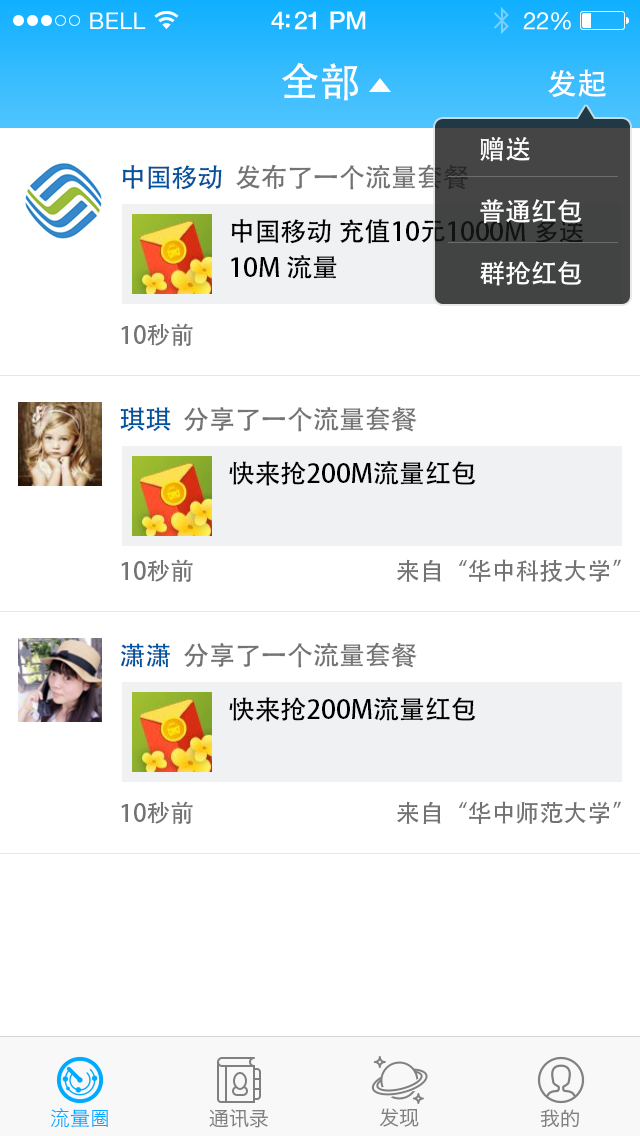
<style>
.page{position:relative;width:640px;height:1136px;background:#ffffff}
.page>*{position:absolute;margin:0}
.t1{font:40px "AdobeHeitiStd-Regular";color:#ffffff}
.t2{font:30px "AdobeHeitiStd-Regular";color:#ffffff}
.t3{font:26px "AdobeHeitiStd-Regular";color:#ffffff}
.t4{font:26px "AdobeHeitiStd-Regular";color:#737373}
.t5{font:26px "AdobeHeitiStd-Regular";color:#00539f}
.t6{font:26px/36px "AdobeHeitiStd-Regular";color:#000000}
.t7{font:24px "AdobeHeitiStd-Regular";color:#737373}
.t8{font:26px "AdobeHeitiStd-Regular";color:#000000}
.t9{font:20px "STHeitiSC-Light";color:#00aaff}
.t10{font:20px "HiraginoSansGB-W3";color:#808080}
</style>
<div class="page">
<p class="t1" style="left:282px;top:62px;width:76px;height:39px">全部</p>
<p class="t2" style="left:548px;top:69px;width:58px;height:28px">发起</p>
<p class="t3" style="left:480px;top:137px;width:50px;height:25px">赠送</p>
<p class="t4" style="left:122px;top:164px;width:347px;height:26px"><span class="t5">中国移动  </span>发布了一个流量套餐</p>
<p class="t3" style="left:480px;top:199px;width:102px;height:25px">普通红包</p>
<p class="t6" style="left:231px;top:218px;width:353px;height:61px">中国移动 充值10元1000M 多送10M 流量</p>
<p class="t3" style="left:480px;top:261px;width:102px;height:25px">群抢红包</p>
<p class="t7" style="left:121px;top:323px;width:72px;height:23px">10秒前</p>
<p class="t4" style="left:120px;top:406px;width:297px;height:26px"><span class="t5">琪琪  </span>分享了一个流量套餐</p>
<p class="t8" style="left:229px;top:461px;width:247px;height:25px">快来抢200M流量红包</p>
<p class="t7" style="left:121px;top:559px;width:72px;height:23px">10秒前</p>
<p class="t7" style="left:397px;top:559px;width:224px;height:24px">来自“华中科技大学”</p>
<p class="t4" style="left:121px;top:642px;width:296px;height:26px"><span class="t5">潇潇  </span>分享了一个流量套餐</p>
<p class="t8" style="left:229px;top:697px;width:247px;height:25px">快来抢200M流量红包</p>
<p class="t7" style="left:121px;top:801px;width:72px;height:23px">10秒前</p>
<p class="t7" style="left:397px;top:801px;width:224px;height:23px">来自“华中师范大学”</p>
<p class="t9" style="left:50px;top:1108px;width:58px;height:19px">流量圈</p>
<p class="t10" style="left:209px;top:1109px;width:59px;height:19px">通讯录</p>
<p class="t10" style="left:379px;top:1108px;width:40px;height:19px">发现</p>
<p class="t10" style="left:540px;top:1109px;width:39px;height:19px">我的</p>
</div>
